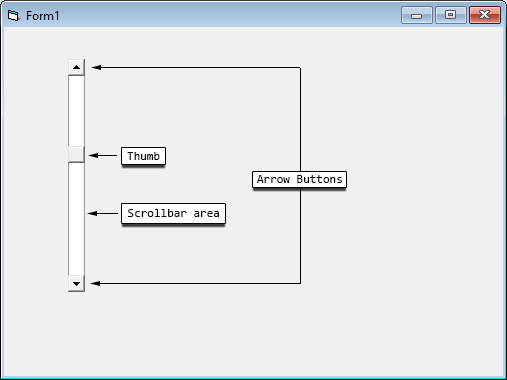
<style>
.page{position:relative;width:507px;height:380px;background:#f0f0f0}
.page>*{position:absolute;margin:0}
.t1{font:12px "Consolas";color:#000000}
</style>
<div class="page">
<p class="t1" style="left:127px;top:152px;width:33px;height:8px">Thumb</p>
<p class="t1" style="left:257px;top:175px;width:85px;height:8px">Arrow Buttons</p>
<p class="t1" style="left:128px;top:209px;width:91px;height:8px">Scrollbar area</p>
</div>
